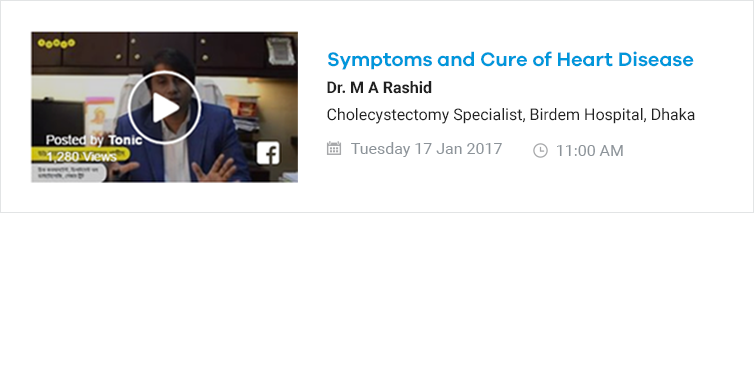
<style>
.page{position:relative;width:754px;height:369px;background:#ffffff}
.page>*{position:absolute;margin:0}
.t1{font:20px "GalanoGrotesque-SemiBold";color:#0097db}
.t2{font:16px "Roboto-Bold";color:#212121}
.t3{font:16px "Roboto-Regular";color:#212121}
.t4{font:16px "Roboto-Regular";color:#8c9399}
</style>
<div class="page">
<p class="t1" style="left:328px;top:51px;width:366px;height:19px">Symptoms and Cure of Heart Disease</p>
<p class="t2" style="left:327px;top:81px;width:105px;height:13px">Dr. M A Rashid</p>
<p class="t3" style="left:327px;top:108px;width:368px;height:16px">Cholecystectomy Specialist, Birdem Hospital, Dhaka</p>
<p class="t4" style="left:351px;top:142px;width:151px;height:15px">Tuesday 17 Jan 2017</p>
<p class="t4" style="left:557px;top:145px;width:66px;height:11px">11:00 AM</p>
</div>
